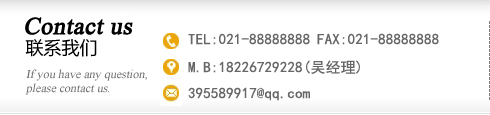
<style>
.page{position:relative;width:490px;height:115px;background:#ffffff}
.page>*{position:absolute;margin:0}
.t1{font:15px "SimHei";letter-spacing:0.01em;color:#676767}
</style>
<div class="page">
<p class="t1" style="left:188px;top:33px;width:122px;height:12px">TEL:021-88888888</p>
<p class="t1" style="left:317px;top:33px;width:122px;height:12px">FAX:021-88888888</p>
<p class="t1" style="left:188px;top:60px;width:172px;height:14px">M.B:18226729228(吴经理)</p>
<p class="t1" style="left:188px;top:87px;width:122px;height:14px">395589917@qq.com</p>
</div>
